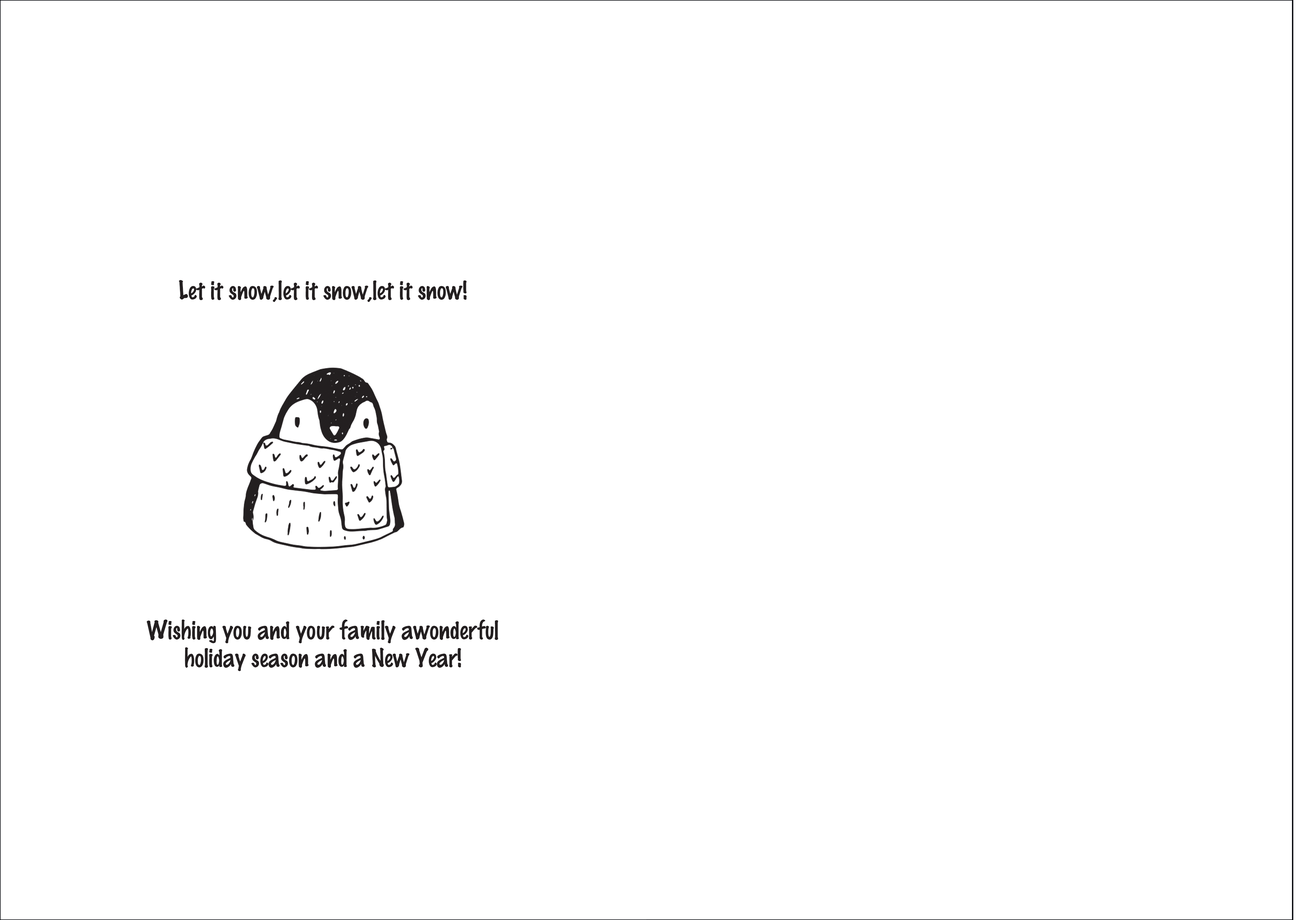
<style>
.page{position:relative;width:1297px;height:920px;background:#ffffff}
.page>*{position:absolute;margin:0}
.t1{font:22.9px/55.6px "MarkerFelt";letter-spacing:0.005em;color:#231f20}
.t2{font:22.9px/35.5px "MarkerFelt";letter-spacing:0.005em;color:#231f20}
.t3{font:22.9px/27.8px "MarkerFelt";letter-spacing:0.005em;color:#231f20}
</style>
<div class="page">
<p class="t1" style="left:146px;top:280px;width:352px;height:391px;text-align:center"><span class="t2">Let it snow,let it snow,let it snow!<br><br><br><br><br><br><br><br><br></span>Wishing you and your family awonderful <br><span class="t3">holiday season and a New Year!</span></p>
</div>
